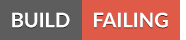
<style>
.page{position:relative;width:186px;height:40px;background:#e05a48}
.page>*{position:absolute;margin:0}
.t1{font:20px "Lato-Bold";color:#ffffff}
</style>
<div class="page">
<p class="t1" style="left:12px;top:12px;width:58px;height:16px">BUILD</p>
<p class="t1" style="left:94px;top:12px;width:74px;height:16px">FAILING</p>
</div>
